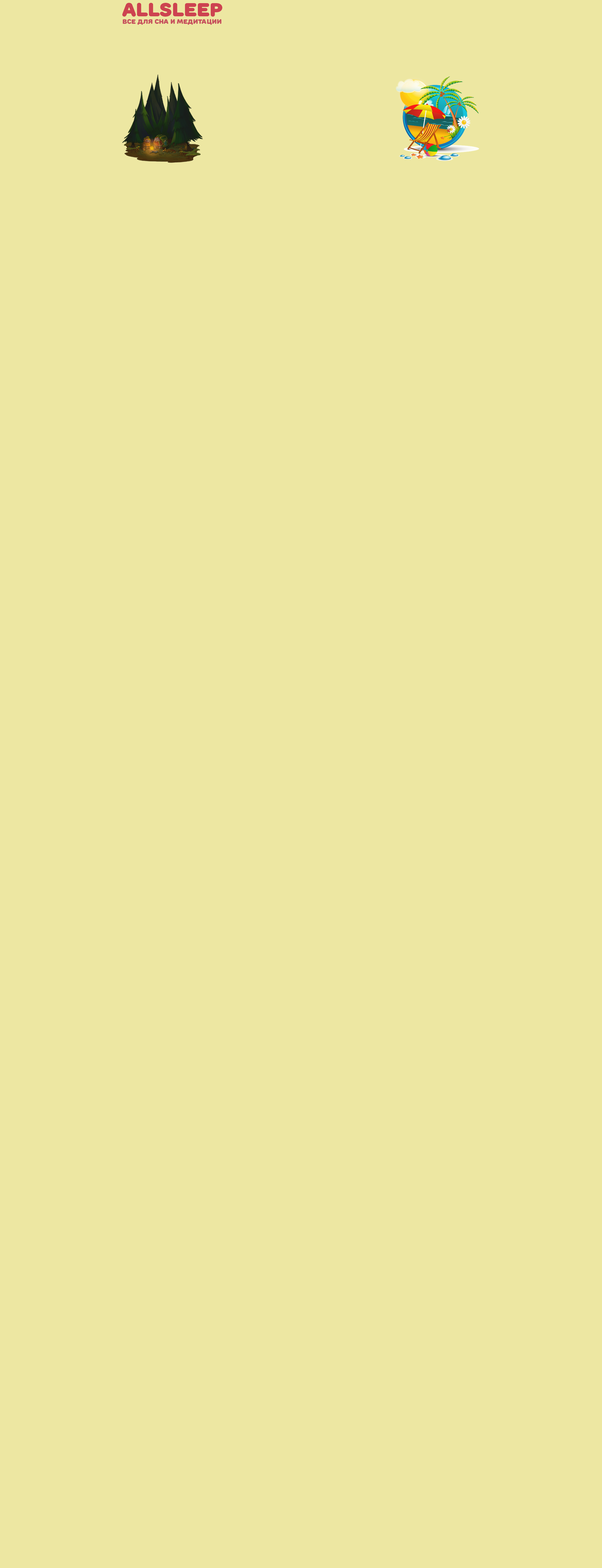
<style>
.page{position:relative;width:602px;height:1568px;background:#ede7a2}
.page>*{position:absolute;margin:0}
.t1{font:18.8px "RoundsBlack";color:#cd4350}
.t2{font:6.5px "RoundsBlack";color:#c7525d}
</style>
<div class="page">
<p class="t1" style="left:122px;top:3px;width:100px;height:14px">allSleep</p>
<p class="t2" style="left:123px;top:19px;width:98px;height:6px">все для сна и медитации</p>
</div>
